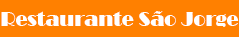
<style>
.page{position:relative;width:239px;height:37px;background:#ff8000}
.page>*{position:absolute;margin:0}
.t1{font:19.8px "Broadway";color:#ffffff}
</style>
<div class="page">
<p class="t1" style="left:1px;top:11px;width:238px;height:16px">Restaurante São Jorge</p>
</div>
